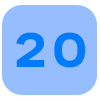
<style>
.page{position:relative;width:100px;height:100px;background:#96beff}
.page>*{position:absolute;margin:0}
.t1{font:50px "CoFoSans-Bold";letter-spacing:0.1em;color:#007bfb}
</style>
<div class="page">
<p class="t1" style="left:16px;top:32px;width:70px;height:36px">20</p>
</div>
